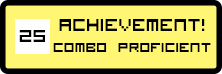
<style>
.page{position:relative;width:222px;height:74px;background:#fff774}
.page>*{position:absolute;margin:0}
.t1{font:23px "VisitorTT1BRK";color:#000000}
.t2{font:18px "VisitorTT1BRK";color:#000000}
</style>
<div class="page">
<p class="t1" style="left:19px;top:30px;width:26px;height:12px">25</p>
<p class="t2" style="left:53px;top:19px;width:158px;height:33px;text-align:center"><span class="t1">achievement!<br></span>Combo proficient</p>
</div>
